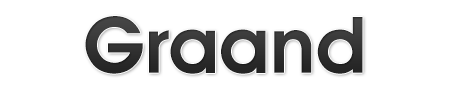
<style>
.page{position:relative;width:453px;height:85px;background:#ffffff}
.page>*{position:absolute;margin:0}
.t1{font:79px "Advantage-Demi";color:#303030}
</style>
<div class="page">
<p class="t1" style="left:85px;top:16px;width:278px;height:58px">Graand</p>
</div>
